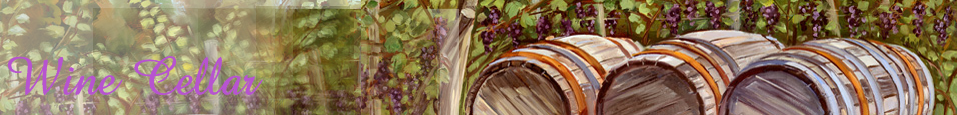
<style>
.page{position:relative;width:957px;height:115px}
.page>*{position:absolute;margin:0}
.t1{font:35px "Abbeyline";color:#b754d0}
</style>
<div class="page">
<p class="t1" style="left:7px;top:56px;width:256px;height:39px">Wine Cellar</p>
</div>
